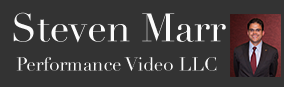
<style>
.page{position:relative;width:284px;height:87px;background:#333333}
.page>*{position:absolute;margin:0}
.t1{font:38.9px "Didot";color:#fbfbfb}
.t2{font:18.5px "Didot";color:#fbfbfb}
</style>
<div class="page">
<p class="t1" style="left:13px;top:12px;width:213px;height:31px">Steven Marr</p>
<p class="t2" style="left:16px;top:57px;width:201px;height:14px">Performance Video LLC</p>
</div>
